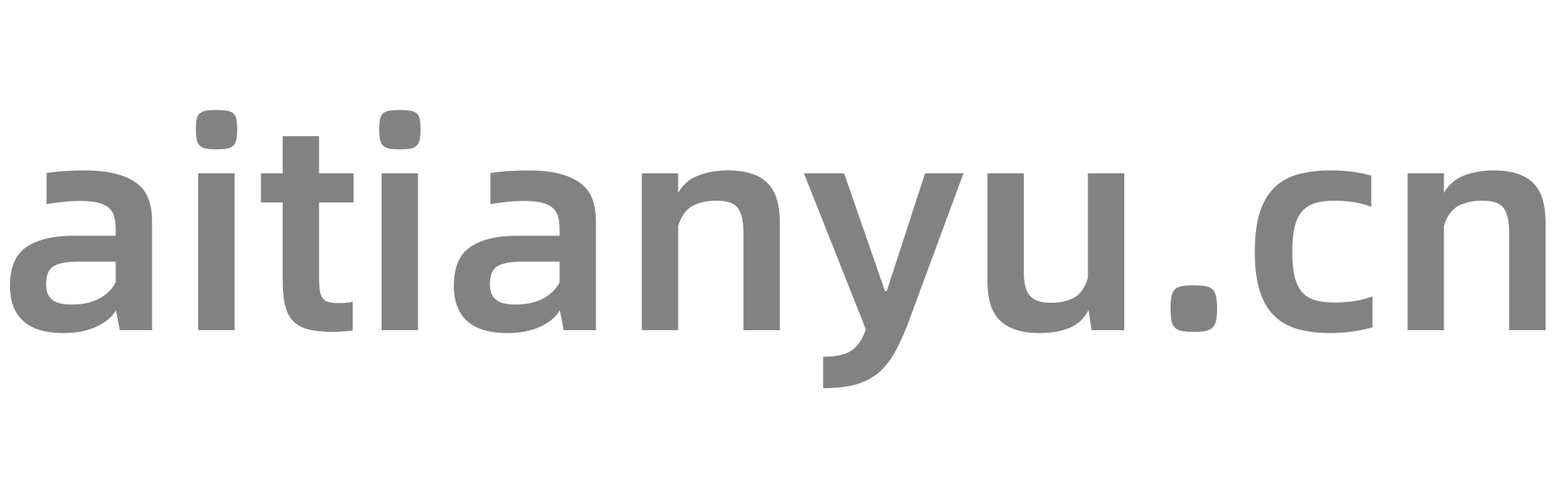
<style>
.page{position:relative;width:1568px;height:496px;background:#ffffff}
.page>*{position:absolute;margin:0}
.t1{font:290.5px "AlibabaPuHuiTi-Medium";color:#828282}
</style>
<div class="page">
<p class="t1" style="left:10px;top:110px;width:1536px;height:278px">aitianyu.cn</p>
</div>
